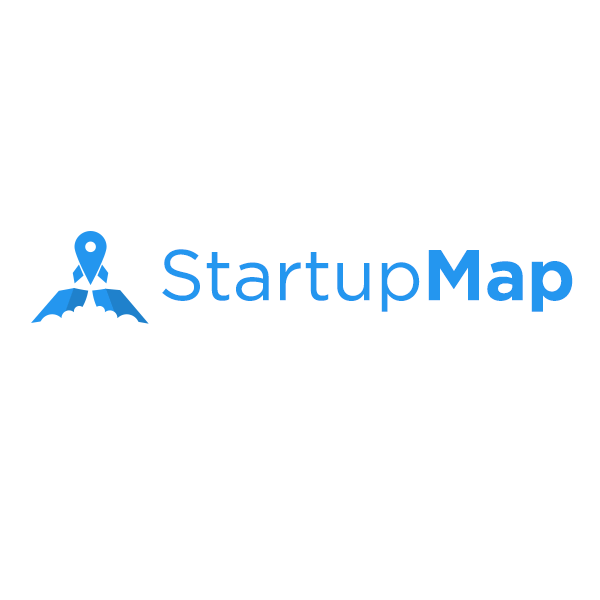
<style>
.page{position:relative;width:600px;height:600px;background:#ffffff}
.page>*{position:absolute;margin:0}
.t1{font:71.4px "Gotham-Book";color:#2496ef}
.t2{font:71.4px "Gotham-Bold";color:#2496ef}
</style>
<div class="page">
<p class="t1" style="left:162px;top:249px;width:411px;height:63px">Startup<span class="t2">Map</span></p>
</div>
